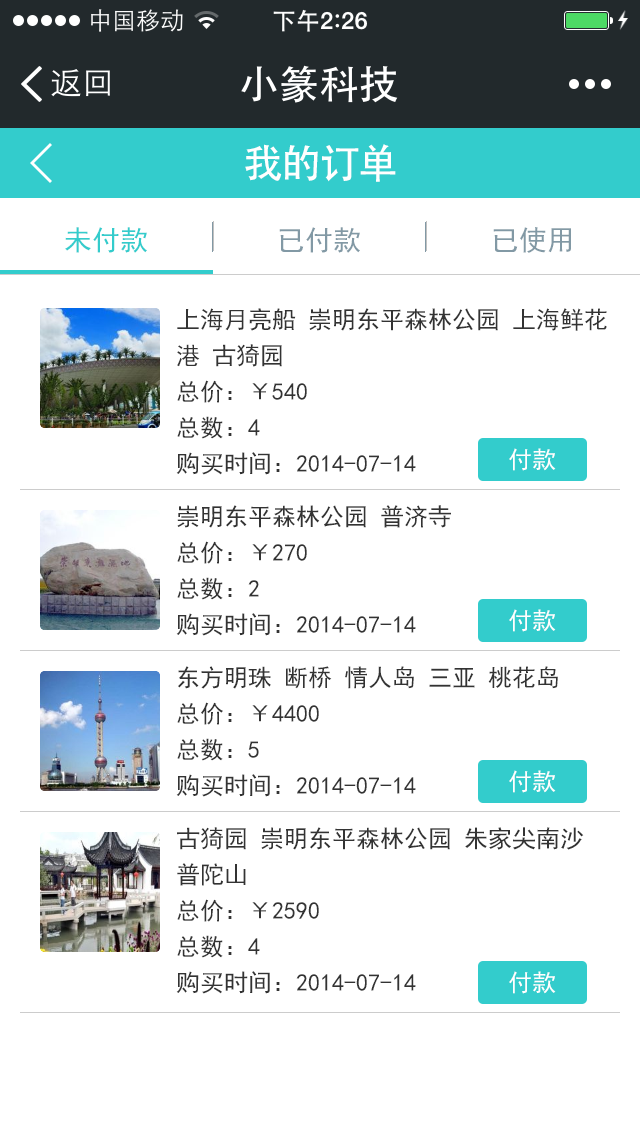
<style>
.page{position:relative;width:640px;height:1136px;background:#ffffff}
.page>*{position:absolute;margin:0}
.t1{font:40px "AdobeHeitiStd-Regular";color:#ffffff}
.t2{font:28px "SimHei";color:#33cccc}
.t3{font:28px "SimHei";color:#8299a5}
.t4{font:24px/36px "SimHei";color:#333333}
.t5{font:24px "SimHei";color:#ffffff}
</style>
<div class="page">
<p class="t1" style="left:245px;top:144px;width:151px;height:38px">我的订单</p>
<p class="t2" style="left:65px;top:227px;width:82px;height:26px">未付款</p>
<p class="t3" style="left:279px;top:227px;width:81px;height:26px">已付款</p>
<p class="t3" style="left:493px;top:227px;width:78px;height:26px">已使用</p>
<p class="t4" style="left:176px;top:308px;width:431px;height:167px;text-align:right">上海月亮船 崇明东平森林公园 上海鲜花<br>港 古猗园<br>总价：￥540<br>总数：4<br>购买时间：2014-07-14</p>
<p class="t5" style="left:509px;top:448px;width:47px;height:23px">付款</p>
<p class="t4" style="left:176px;top:505px;width:275px;height:131px;text-align:right">崇明东平森林公园 普济寺<br>总价：￥270<br>总数：2<br>购买时间：2014-07-14</p>
<p class="t5" style="left:509px;top:609px;width:47px;height:23px">付款</p>
<p class="t4" style="left:176px;top:666px;width:382px;height:131px;text-align:right">东方明珠 断桥 情人岛 三亚 桃花岛<br>总价：￥4400<br>总数：5<br>购买时间：2014-07-14</p>
<p class="t5" style="left:509px;top:770px;width:47px;height:23px">付款</p>
<p class="t4" style="left:176px;top:827px;width:408px;height:167px;text-align:right">古猗园 崇明东平森林公园 朱家尖南沙<br>普陀山 <br>总价：￥2590<br>总数：4<br>购买时间：2014-07-14</p>
<p class="t5" style="left:509px;top:971px;width:47px;height:23px">付款</p>
</div>
